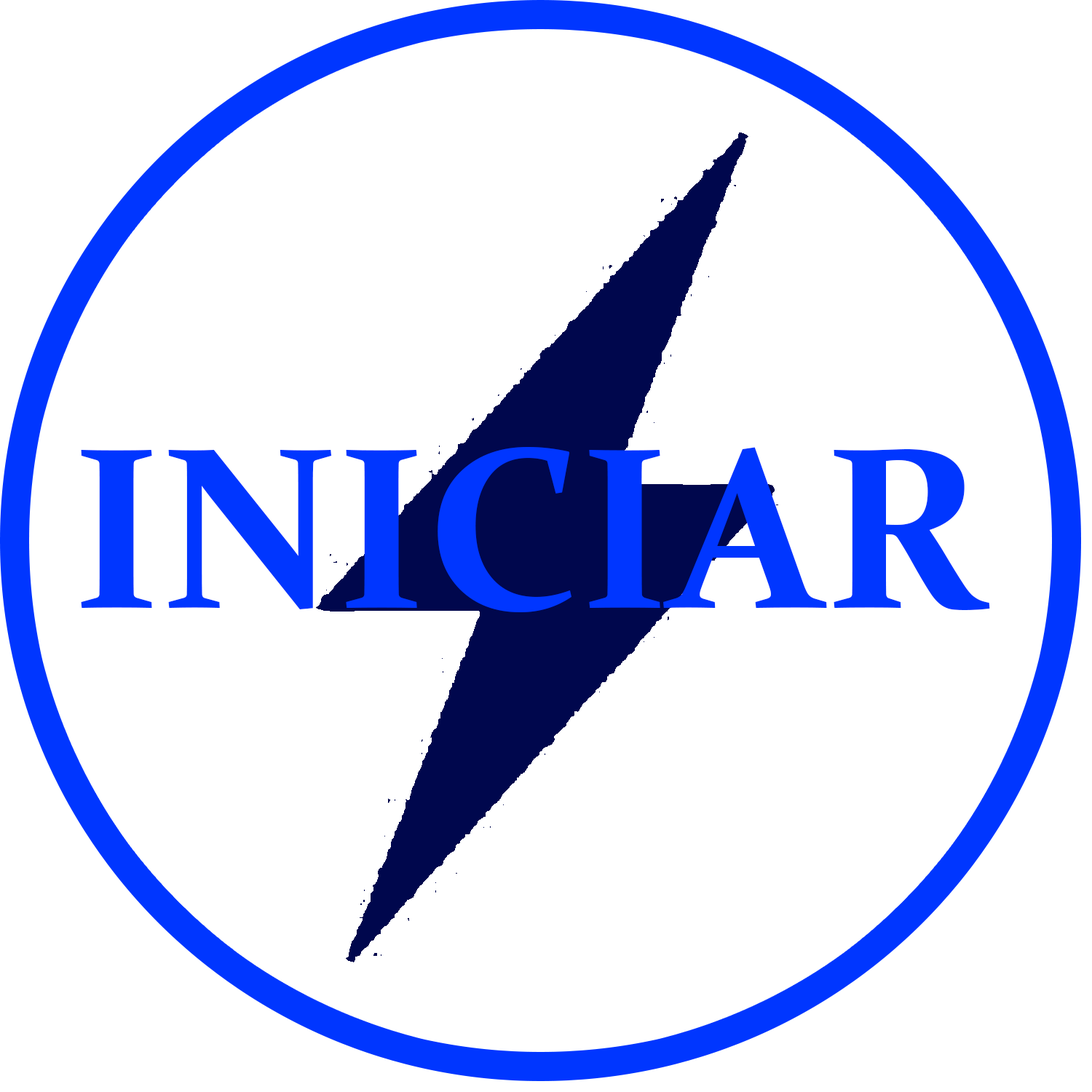
<style>
.page{position:relative;width:1092px;height:1092px;background:#ffffff}
.page>*{position:absolute;margin:0}
.t1{font:231.1px "Constantia-Bold";color:#0036ff}
</style>
<div class="page">
<p class="t1" style="left:81px;top:446px;width:909px;height:166px">INICIAR</p>
</div>
